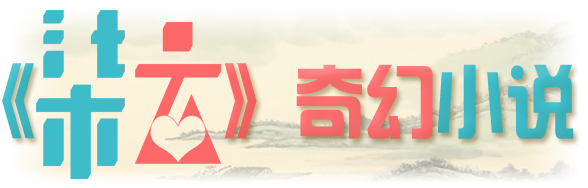
<style>
.page{position:relative;width:588px;height:188px}
.page>*{position:absolute;margin:0}
.t1{font:80px "¹ã½Ý¾ÓÃÔÄã×Ö¿â";color:#fd6f6f;scale:0.88 1}
.t2{font:83.1px "¹ã½Ý¾ÓÃÔÄã×Ö¿â";color:#3ebcca;scale:0.88 1}
.t3{font:83.1px "¹ã½Ý¾ÓÃÔÄã×Ö¿â";color:#fd6868;scale:0.88 1}
.t4{font:80px "¹ã½Ý¾ÓÃÔÄã×Ö¿â";color:#3ebbc8;scale:0.88 1}
</style>
<div class="page">
<p class="t1" style="left:2px;top:63px;width:572px;height:76px"><span class="t2">《     </span><span class="t3">》</span>奇幻<span class="t4">小说</span></p>
</div>
